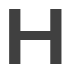
<style>
.page{position:relative;width:72px;height:72px;background:#ffffff}
.page>*{position:absolute;margin:0}
.t1{font:70.6px "ExpoM-HM";color:#404040;scale:1.13 1}
</style>
<div class="page">
<p class="t1" style="left:9px;top:9px;width:53px;height:55px">H</p>
</div>
